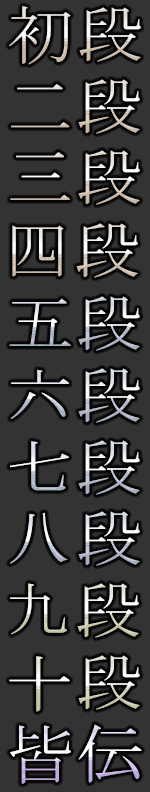
<style>
.page{position:relative;width:150px;height:792px;background:#333333}
.page>*{position:absolute;margin:0}
.t1{font:64px "MS-Mincho";letter-spacing:0.05em;scale:1.05 1}
</style>
<div class="page">
<p class="t1" style="left:9px;top:6px;width:132px;height:59px">初段</p>
<p class="t1" style="left:9px;top:6px;width:132px;height:59px">初段</p>
<p class="t1" style="left:11px;top:79px;width:129px;height:55px">二段</p>
<p class="t1" style="left:11px;top:79px;width:129px;height:55px">二段</p>
<p class="t1" style="left:10px;top:150px;width:130px;height:55px">三段</p>
<p class="t1" style="left:10px;top:150px;width:130px;height:55px">三段</p>
<p class="t1" style="left:12px;top:223px;width:126px;height:55px">四段</p>
<p class="t1" style="left:12px;top:223px;width:126px;height:55px">四段</p>
<p class="t1" style="left:9px;top:296px;width:131px;height:55px">五段</p>
<p class="t1" style="left:9px;top:296px;width:131px;height:55px">五段</p>
<p class="t1" style="left:10px;top:368px;width:130px;height:55px">六段</p>
<p class="t1" style="left:10px;top:368px;width:130px;height:55px">六段</p>
<p class="t1" style="left:10px;top:440px;width:130px;height:55px">七段</p>
<p class="t1" style="left:10px;top:440px;width:130px;height:55px">七段</p>
<p class="t1" style="left:9px;top:511px;width:131px;height:55px">八段</p>
<p class="t1" style="left:9px;top:511px;width:131px;height:55px">八段</p>
<p class="t1" style="left:10px;top:583px;width:129px;height:55px">九段</p>
<p class="t1" style="left:10px;top:583px;width:129px;height:55px">九段</p>
<p class="t1" style="left:9px;top:655px;width:131px;height:57px">十段</p>
<p class="t1" style="left:9px;top:655px;width:131px;height:57px">十段</p>
<p class="t1" style="left:10px;top:724px;width:132px;height:60px">皆伝</p>
<p class="t1" style="left:10px;top:724px;width:132px;height:60px">皆伝</p>
</div>
